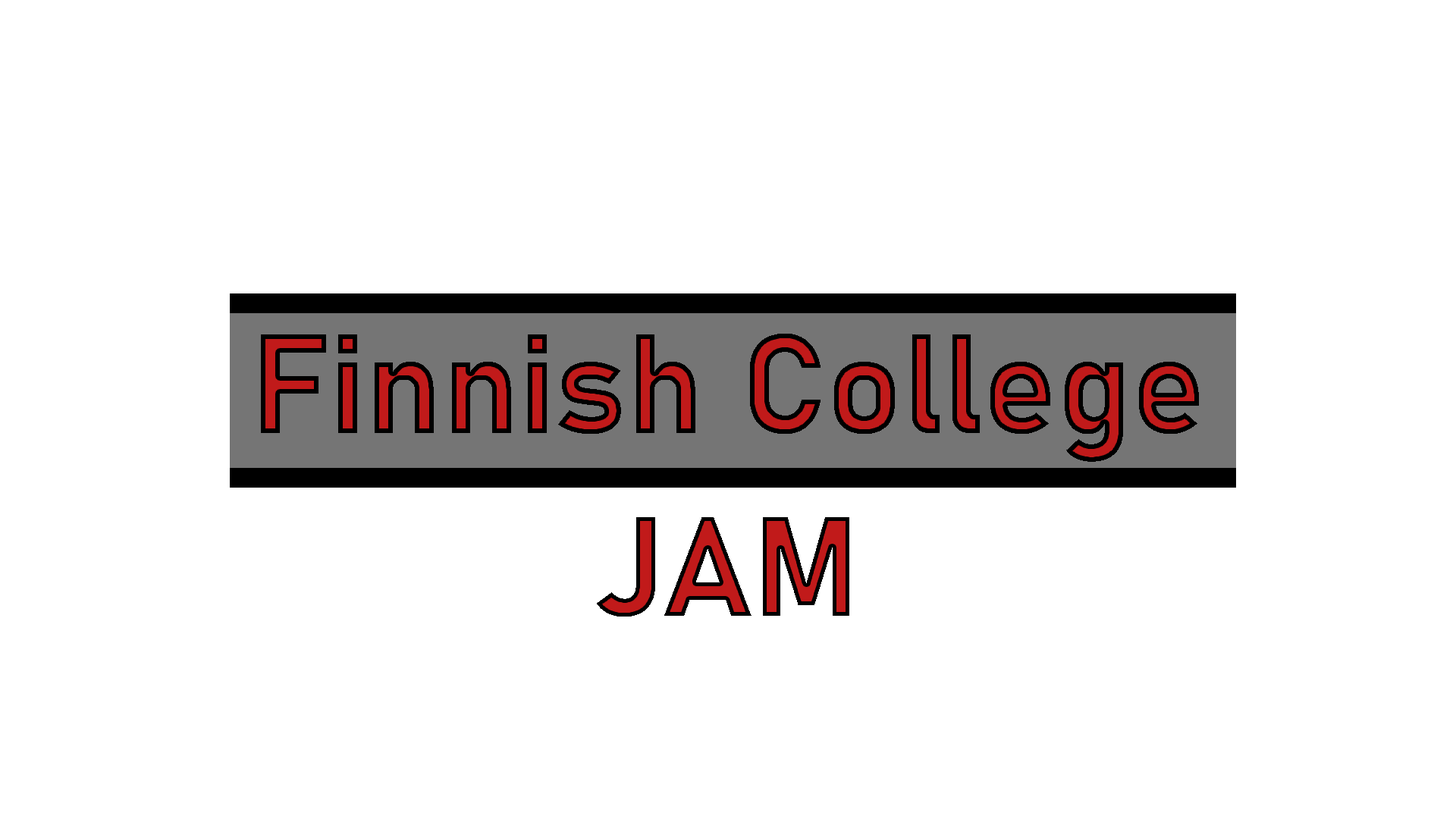
<style>
.page{position:relative;width:1456px;height:819px;background:#ffffff}
.page>*{position:absolute;margin:0}
.t1{font:138.7px "Bahnschrift-Bold"}
</style>
<div class="page">
<p class="t1" style="left:261px;top:334px;width:938px;height:128px">Finnish College</p>
<p class="t1" style="left:597px;top:517px;width:252px;height:100px">JAM</p>
</div>
